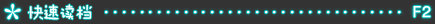
<style>
.page{position:relative;width:435px;height:24px;background:#333333}
.page>*{position:absolute;margin:0}
.t1{font:18px "¢è?";color:#ffffff}
</style>
<div class="page">
<p class="t1" style="left:28px;top:4px;width:64px;height:16px">快速读档</p>
</div>
